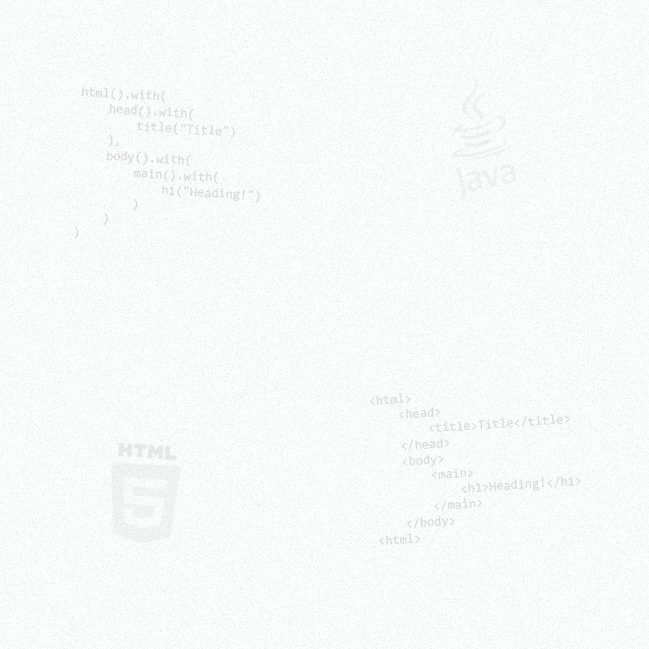
<style>
.page{position:relative;width:649px;height:649px}
.page>*{position:absolute;margin:0}
.t1{font:13px "Consolas";color:#dbd9d9}
</style>
<div class="page">
<p class="t1" style="left:74px;top:86px;width:186px;height:153px;rotate:3deg">html().with(<br>    head().with(<br>        title("Title")<br>    ),<br>    body().with(<br>        main().with(<br>            h1("Heading!")<br>        )<br>    )<br>)</p>
<p class="t1" style="left:369px;top:393px;width:212px;height:153px;rotate:-4deg">&lt;html&gt;<br>    &lt;head&gt;<br>        &lt;title&gt;Title&lt;/title&gt;<br>    &lt;/head&gt;<br>    &lt;body&gt;<br>        &lt;main&gt;<br>            &lt;h1&gt;Heading!&lt;/h1&gt;<br>        &lt;/main&gt;<br>    &lt;/body&gt;<br>&lt;html&gt;</p>
</div>
